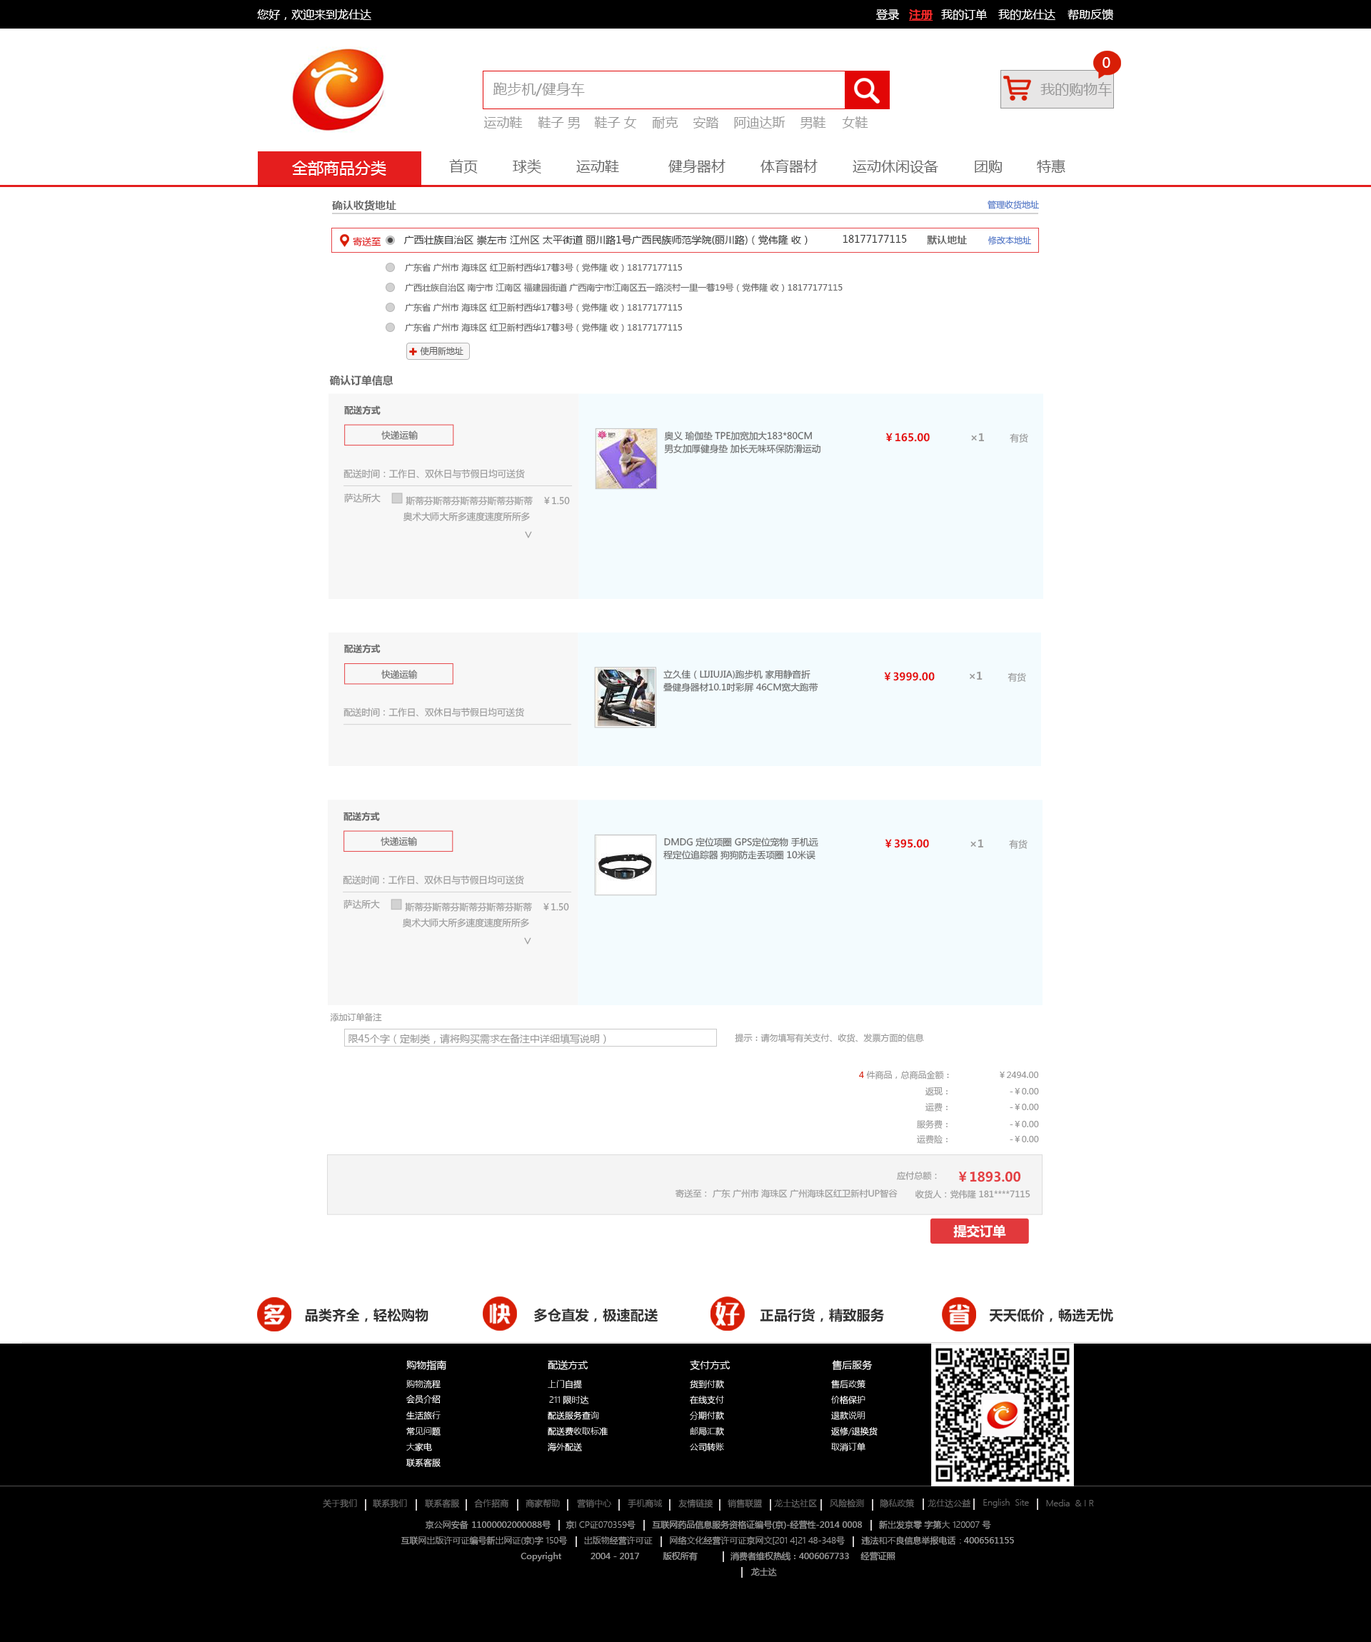
<style>
.page{position:relative;width:1371px;height:1642px;background:#ffffff}
.page>*{position:absolute;margin:0}
.t1{font:11.4px "MicrosoftYaHei";color:#fefefe}
.t2{font:11.4px "MicrosoftYaHei";color:#ffffff}
.t3{font:11.4px "MicrosoftYaHei";color:#fe2d2d;font-weight:bold;text-decoration:underline}
.t4{font:14.3px "MicrosoftYaHei";color:#ffffff}
.t5{font:14.3px "MicrosoftYaHei";color:#999999}
.t6{font:12.9px "MicrosoftYaHei";color:#999999}
.t7{font:15.7px "MicrosoftYaHei";color:#ffffff}
.t8{font:14.3px "MicrosoftYaHei";color:#666666}
.t9{font:10.7px "MicrosoftYaHei-Bold";color:#666666}
.t10{font:8.6px "MicrosoftYaHei";color:#4f77c8}
.t11{font:9.3px "MicrosoftYaHei";color:#e00c0c}
.t12{font:10px "MicrosoftYaHei";color:#333333}
.t13{font:10px "MicrosoftYaHei-Bold";color:#666666}
.t14{font:8.6px "MicrosoftYaHei";color:#666666}
.t15{font:10.5px "MicrosoftYaHei-Bold";color:#666666}
.t16{font:9px "MicrosoftYaHei-Bold";color:#666666}
.t17{font:9px "MicrosoftYaHei";color:#666666}
.t18{font:10.5px "MicrosoftYaHei-Bold";color:#e50e0e}
.t19{font:10.5px "MicrosoftYaHei-Bold";color:#999999}
.t20{font:9px "MicrosoftYaHei";color:#999999}
.t21{font:13.5px "MicrosoftYaHei";color:#999999}
.t22{font:8.6px "MicrosoftYaHei";color:#999999}
.t23{font:10px "MicrosoftYaHei";color:#999999}
.t24{font:8.6px "MicrosoftYaHei";color:#d81e06}
.t25{font:13px "MicrosoftYaHei-Bold";color:#e43f43}
.t26{font:13px "MicrosoftYaHei-Bold";color:#ffffff}
.t27{font:13.7px "MicrosoftYaHei-Bold";color:#333333}
.t28{font:10px "MicrosoftYaHei";color:#ffffff}
.t29{font:8.6px "MicrosoftYaHeiLight";color:#ffffff}
.t30{font:8.6px "MicrosoftYaHeiLight";color:#666666}
.t31{font:8.6px "MicrosoftYaHeiLight";color:#999999}
</style>
<div class="page">
<p class="t1" style="left:257px;top:9px;width:114px;height:11px">您好，欢迎来到龙仕达</p>
<p class="t2" style="left:876px;top:9px;width:24px;height:11px">登录</p>
<p class="t3" style="left:909px;top:9px;width:24px;height:12px">注册</p>
<p class="t2" style="left:941px;top:9px;width:46px;height:11px">我的订单</p>
<p class="t2" style="left:998px;top:9px;width:57px;height:11px">我的龙仕达</p>
<p class="t2" style="left:1067px;top:9px;width:46px;height:11px">帮助反馈</p>
<p class="t4" style="left:1102px;top:57px;width:8px;height:11px">0</p>
<p class="t5" style="left:493px;top:82px;width:92px;height:14px">跑步机/健身车</p>
<p class="t5" style="left:1040px;top:82px;width:72px;height:14px">我的购物车</p>
<p class="t6" style="left:483px;top:116px;width:40px;height:13px">运动鞋</p>
<p class="t6" style="left:538px;top:116px;width:42px;height:13px">鞋子 男</p>
<p class="t6" style="left:594px;top:116px;width:43px;height:13px">鞋子 女</p>
<p class="t6" style="left:652px;top:116px;width:26px;height:13px">耐克</p>
<p class="t6" style="left:692px;top:116px;width:26px;height:13px">安踏</p>
<p class="t6" style="left:734px;top:116px;width:51px;height:13px">阿迪达斯</p>
<p class="t6" style="left:800px;top:116px;width:26px;height:13px">男鞋</p>
<p class="t6" style="left:842px;top:116px;width:26px;height:13px">女鞋</p>
<p class="t7" style="left:292px;top:161px;width:94px;height:15px">全部商品分类</p>
<p class="t8" style="left:449px;top:159px;width:29px;height:14px">首页</p>
<p class="t8" style="left:513px;top:159px;width:28px;height:14px">球类</p>
<p class="t8" style="left:576px;top:160px;width:43px;height:13px">运动鞋</p>
<p class="t8" style="left:668px;top:159px;width:57px;height:14px">健身器材</p>
<p class="t8" style="left:760px;top:159px;width:57px;height:14px">体育器材</p>
<p class="t8" style="left:852px;top:160px;width:86px;height:13px">运动休闲设备</p>
<p class="t8" style="left:974px;top:160px;width:28px;height:13px">团购</p>
<p class="t8" style="left:1037px;top:159px;width:28px;height:14px">特惠</p>
<p class="t9" style="left:332px;top:200px;width:64px;height:11px">确认收货地址</p>
<p class="t10" style="left:987px;top:200px;width:52px;height:9px">管理收货地址</p>
<p class="t11" style="left:353px;top:237px;width:28px;height:9px">寄送至</p>
<p class="t12" style="left:403px;top:235px;width:404px;height:11px">广西壮族自治区 崇左市 江州区 太平街道 丽川路1号广西民族师范学院(丽川路)（党伟隆 收）</p>
<p class="t12" style="left:842px;top:235px;width:65px;height:8px">18177177115</p>
<p class="t13" style="left:927px;top:235px;width:40px;height:10px">默认地址</p>
<p class="t10" style="left:987px;top:236px;width:44px;height:9px">修改本地址</p>
<p class="t14" style="left:405px;top:263px;width:277px;height:9px">广东省 广州市 海珠区 红卫新村西华17巷3号（党伟隆 收）18177177115</p>
<p class="t14" style="left:405px;top:283px;width:437px;height:9px">广西壮族自治区 南宁市 江南区 福建园街道 广西南宁市江南区五一路淡村一里一巷19号（党伟隆 收）18177177115</p>
<p class="t14" style="left:405px;top:303px;width:277px;height:9px">广东省 广州市 海珠区 红卫新村西华17巷3号（党伟隆 收）18177177115</p>
<p class="t14" style="left:405px;top:323px;width:277px;height:9px">广东省 广州市 海珠区 红卫新村西华17巷3号（党伟隆 收）18177177115</p>
<p class="t14" style="left:420px;top:346px;width:43px;height:10px">使用新地址</p>
<p class="t15" style="left:329px;top:375px;width:64px;height:11px">确认订单信息</p>
<p class="t16" style="left:344px;top:405px;width:37px;height:10px">配送方式</p>
<p class="t17" style="left:381px;top:430px;width:37px;height:10px">快递运输</p>
<p class="t17" style="left:664px;top:431px;width:148px;height:9px">奥义 瑜伽垫 TPE加宽加大183*80CM</p>
<p class="t18" style="left:885px;top:433px;width:45px;height:9px">￥165.00</p>
<p class="t19" style="left:971px;top:433px;width:13px;height:8px">×1</p>
<p class="t20" style="left:1009px;top:433px;width:19px;height:10px">有货</p>
<p class="t17" style="left:664px;top:444px;width:157px;height:9px">男女加厚健身垫 加长无味环保防滑运动</p>
<p class="t20" style="left:343px;top:469px;width:182px;height:9px">配送时间：工作日、双休日与节假日均可送货</p>
<p class="t20" style="left:344px;top:493px;width:37px;height:10px">萨达所大</p>
<p class="t20" style="left:405px;top:496px;width:128px;height:9px">斯蒂芬斯蒂芬斯蒂芬斯蒂芬斯蒂</p>
<p class="t20" style="left:544px;top:497px;width:26px;height:8px">￥1.50</p>
<p class="t20" style="left:403px;top:512px;width:127px;height:9px">奥术大师大所多速度速度所所多</p>
<p class="t21" style="left:525px;top:531px;width:7px;height:7px">∨</p>
<p class="t16" style="left:344px;top:644px;width:37px;height:9px">配送方式</p>
<p class="t17" style="left:381px;top:670px;width:37px;height:9px">快递运输</p>
<p class="t17" style="left:663px;top:670px;width:147px;height:10px">立久佳（LIJIUJIA)跑步机 家用静音折</p>
<p class="t18" style="left:884px;top:672px;width:50px;height:9px">￥3999.00</p>
<p class="t19" style="left:969px;top:671px;width:13px;height:9px">×1</p>
<p class="t20" style="left:1007px;top:672px;width:19px;height:10px">有货</p>
<p class="t17" style="left:663px;top:682px;width:155px;height:10px">叠健身器材10.1吋彩屏 46CM宽大跑带</p>
<p class="t20" style="left:343px;top:707px;width:181px;height:10px">配送时间：工作日、双休日与节假日均可送货</p>
<p class="t16" style="left:343px;top:812px;width:37px;height:9px">配送方式</p>
<p class="t17" style="left:381px;top:837px;width:36px;height:9px">快递运输</p>
<p class="t17" style="left:664px;top:837px;width:154px;height:10px">DMDG 定位项圈 GPS定位宠物 手机远</p>
<p class="t18" style="left:885px;top:839px;width:44px;height:9px">￥395.00</p>
<p class="t19" style="left:970px;top:839px;width:13px;height:8px">×1</p>
<p class="t20" style="left:1009px;top:840px;width:18px;height:9px">有货</p>
<p class="t17" style="left:663px;top:850px;width:152px;height:10px">程定位追踪器 狗狗防走丢项圈 10米误</p>
<p class="t20" style="left:343px;top:875px;width:181px;height:10px">配送时间：工作日、双休日与节假日均可送货</p>
<p class="t20" style="left:343px;top:900px;width:37px;height:9px">萨达所大</p>
<p class="t20" style="left:405px;top:902px;width:127px;height:10px">斯蒂芬斯蒂芬斯蒂芬斯蒂芬斯蒂</p>
<p class="t20" style="left:543px;top:903px;width:26px;height:8px">￥1.50</p>
<p class="t20" style="left:403px;top:918px;width:126px;height:9px">奥术大师大所多速度速度所所多</p>
<p class="t21" style="left:524px;top:937px;width:7px;height:7px">∨</p>
<p class="t22" style="left:330px;top:1012px;width:52px;height:10px">添加订单备注</p>
<p class="t23" style="left:348px;top:1034px;width:258px;height:10px">限45个字（定制类，请将购买需求在备注中详细填写说明）</p>
<p class="t22" style="left:735px;top:1033px;width:189px;height:9px">提示：请勿填写有关支付、收货、发票方面的信息</p>
<p class="t22" style="left:859px;top:1070px;width:180px;height:9px"><span class="t24">4</span> 件商品，总商品金额：                  ￥2494.00</p>
<p class="t22" style="left:925px;top:1087px;width:114px;height:9px">返现：                       -￥0.00</p>
<p class="t22" style="left:925px;top:1102px;width:114px;height:10px">运费：                       -￥0.00</p>
<p class="t22" style="left:917px;top:1119px;width:122px;height:10px">服务费：                       -￥0.00</p>
<p class="t22" style="left:917px;top:1134px;width:122px;height:10px">运费险：                       -￥0.00</p>
<p class="t22" style="left:897px;top:1171px;width:40px;height:9px">应付总额：</p>
<p class="t25" style="left:958px;top:1172px;width:62px;height:10px">￥1893.00</p>
<p class="t22" style="left:675px;top:1189px;width:222px;height:9px">寄送至： 广东 广州市 海珠区 广州海珠区红卫新村UP智谷</p>
<p class="t22" style="left:915px;top:1189px;width:115px;height:10px">收货人：党伟隆 181****7115</p>
<p class="t26" style="left:953px;top:1224px;width:53px;height:14px">提交订单</p>
<p class="t27" style="left:305px;top:1309px;width:123px;height:13px">品类齐全，轻松购物</p>
<p class="t27" style="left:534px;top:1309px;width:124px;height:13px">多仓直发，极速配送</p>
<p class="t27" style="left:760px;top:1309px;width:124px;height:13px">正品行货，精致服务</p>
<p class="t27" style="left:989px;top:1309px;width:124px;height:13px">天天低价，畅选无忧</p>
<p class="t28" style="left:406px;top:1360px;width:40px;height:11px">购物指南</p>
<p class="t28" style="left:548px;top:1360px;width:40px;height:10px">配送方式</p>
<p class="t28" style="left:690px;top:1360px;width:40px;height:11px">支付方式</p>
<p class="t28" style="left:832px;top:1360px;width:40px;height:11px">售后服务</p>
<p class="t29" style="left:406px;top:1379px;width:34px;height:10px">购物流程</p>
<p class="t29" style="left:548px;top:1380px;width:34px;height:9px">上门自提</p>
<p class="t29" style="left:690px;top:1380px;width:34px;height:9px">货到付款</p>
<p class="t29" style="left:831px;top:1379px;width:34px;height:10px">售后政策</p>
<p class="t29" style="left:406px;top:1394px;width:34px;height:10px">会员介绍</p>
<p class="t29" style="left:549px;top:1396px;width:40px;height:8px">211 限时达</p>
<p class="t29" style="left:690px;top:1396px;width:34px;height:8px">在线支付</p>
<p class="t29" style="left:831px;top:1396px;width:34px;height:8px">价格保护</p>
<p class="t29" style="left:406px;top:1411px;width:34px;height:9px">生活旅行</p>
<p class="t29" style="left:548px;top:1411px;width:51px;height:9px">配送服务查询</p>
<p class="t29" style="left:690px;top:1411px;width:34px;height:9px">分期付款</p>
<p class="t29" style="left:831px;top:1411px;width:34px;height:9px">退款说明</p>
<p class="t29" style="left:406px;top:1427px;width:34px;height:9px">常见问题</p>
<p class="t29" style="left:548px;top:1427px;width:60px;height:9px">配送费收取标准</p>
<p class="t29" style="left:690px;top:1427px;width:34px;height:9px">邮局汇款</p>
<p class="t29" style="left:831px;top:1426px;width:46px;height:10px">返修/退换货</p>
<p class="t29" style="left:406px;top:1442px;width:26px;height:9px">大家电</p>
<p class="t29" style="left:548px;top:1442px;width:34px;height:9px">海外配送</p>
<p class="t29" style="left:690px;top:1443px;width:34px;height:8px">公司转账</p>
<p class="t29" style="left:831px;top:1442px;width:34px;height:9px">取消订单</p>
<p class="t29" style="left:406px;top:1458px;width:34px;height:9px">联系客服</p>
<p class="t30" style="left:323px;top:1499px;width:34px;height:9px">关于我们</p>
<p class="t30" style="left:373px;top:1499px;width:34px;height:9px">联系我们</p>
<p class="t30" style="left:425px;top:1498px;width:35px;height:10px">联系客服</p>
<p class="t30" style="left:474px;top:1498px;width:35px;height:10px">合作招商</p>
<p class="t30" style="left:525px;top:1498px;width:35px;height:10px">商家帮助</p>
<p class="t30" style="left:577px;top:1499px;width:34px;height:9px">营销中心</p>
<p class="t30" style="left:628px;top:1498px;width:35px;height:10px">手机商城</p>
<p class="t30" style="left:678px;top:1498px;width:34px;height:10px">友情链接</p>
<p class="t30" style="left:727px;top:1498px;width:35px;height:10px">销售联盟</p>
<p class="t30" style="left:774px;top:1499px;width:43px;height:9px">龙士达社区</p>
<p class="t30" style="left:830px;top:1498px;width:34px;height:10px">风险检测</p>
<p class="t30" style="left:880px;top:1498px;width:35px;height:10px">隐私政策</p>
<p class="t30" style="left:927px;top:1498px;width:43px;height:10px">龙仕达公益</p>
<p class="t30" style="left:983px;top:1498px;width:46px;height:10px">English  Site</p>
<p class="t30" style="left:1046px;top:1499px;width:48px;height:7px">Media  &amp; I R</p>
<p class="t31" style="left:425px;top:1520px;width:43px;height:9px">京公网安备</p>
<p class="t22" style="left:472px;top:1521px;width:79px;height:8px">11000002000088号</p>
<p class="t31" style="left:565px;top:1520px;width:70px;height:9px">京I CP证070359号</p>
<p class="t22" style="left:652px;top:1520px;width:210px;height:9px">互联网药品信息服务资格证编号(京)-经营性-2014 0008</p>
<p class="t31" style="left:879px;top:1520px;width:112px;height:9px">新出发京零 字第大 120007 号</p>
<p class="t31" style="left:400px;top:1536px;width:168px;height:9px">互联网出版许可证编号新出网证(京)字 150号</p>
<p class="t31" style="left:584px;top:1536px;width:69px;height:9px">出版物经营许可证</p>
<p class="t31" style="left:670px;top:1536px;width:175px;height:9px">网络文化经营许可证京网文[201 4]21 48-348号</p>
<p class="t31" style="left:861px;top:1536px;width:100px;height:9px">违法和不良信息举报电话：</p>
<p class="t22" style="left:964px;top:1537px;width:50px;height:6px">4006561155</p>
<p class="t22" style="left:520px;top:1552px;width:41px;height:9px">Copyright</p>
<p class="t22" style="left:590px;top:1553px;width:50px;height:6px">2004 - 2017</p>
<p class="t22" style="left:663px;top:1551px;width:34px;height:10px">版权所有</p>
<p class="t22" style="left:730px;top:1551px;width:119px;height:10px">消费者维权热线：4006067733</p>
<p class="t22" style="left:860px;top:1551px;width:35px;height:10px">经营证照</p>
<p class="t22" style="left:750px;top:1568px;width:27px;height:8px">龙士达</p>
</div>
